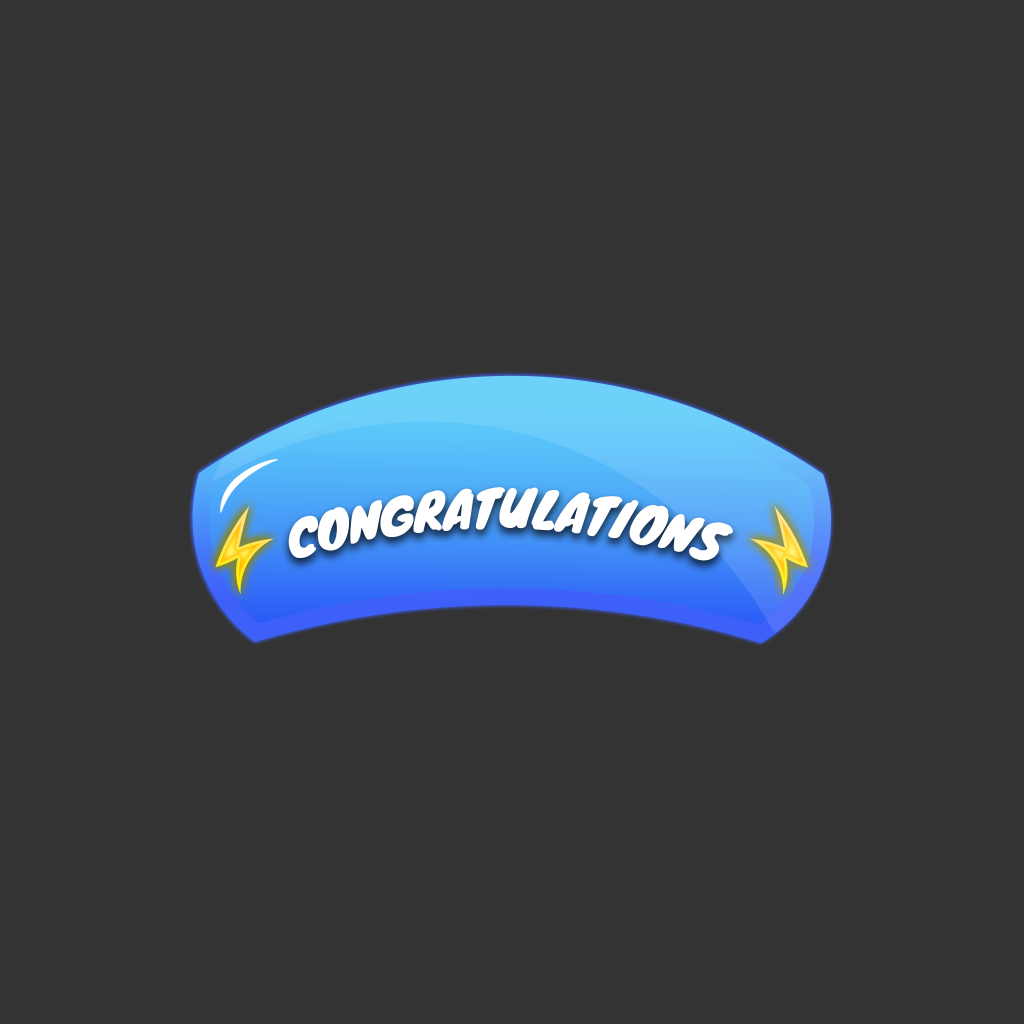
<style>
.page{position:relative;width:1024px;height:1024px;background:#333333}
.page>*{position:absolute;margin:0}
.t1{font:48.4px "Knewave-Regular";color:#ffffff}
</style>
<div class="page">
<p class="t1" style="left:288px;top:487px;width:445px;height:74px;rotate:1deg">CONGRATULATIONS</p>
</div>
